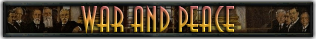
<style>
.page{position:relative;width:316px;height:39px}
.page>*{position:absolute;margin:0}
.t1{font:36px "AnnaITCTT"}
</style>
<div class="page">
<p class="t1" style="left:81px;top:5px;width:153px;height:29px">WAR AND PEACE</p>
</div>
